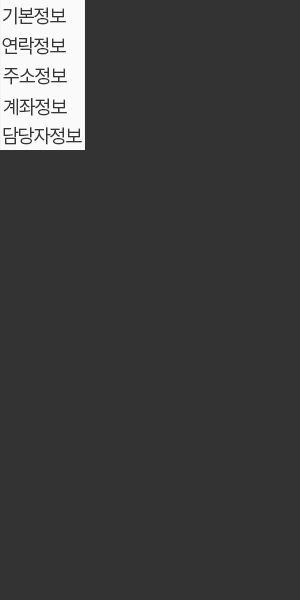
<style>
.page{position:relative;width:300px;height:600px;background:#333333}
.page>*{position:absolute;margin:0}
.t1{font:19.2px "NotoSansCJKkr-DemiLight";letter-spacing:-0.08em;color:#363636}
</style>
<div class="page">
<p class="t1" style="left:2px;top:7px;width:64px;height:18px">기본정보</p>
<p class="t1" style="left:2px;top:37px;width:64px;height:18px">연락정보</p>
<p class="t1" style="left:3px;top:67px;width:64px;height:18px">주소정보</p>
<p class="t1" style="left:3px;top:98px;width:64px;height:18px">계좌정보</p>
<p class="t1" style="left:3px;top:126px;width:79px;height:19px">담당자정보</p>
</div>
